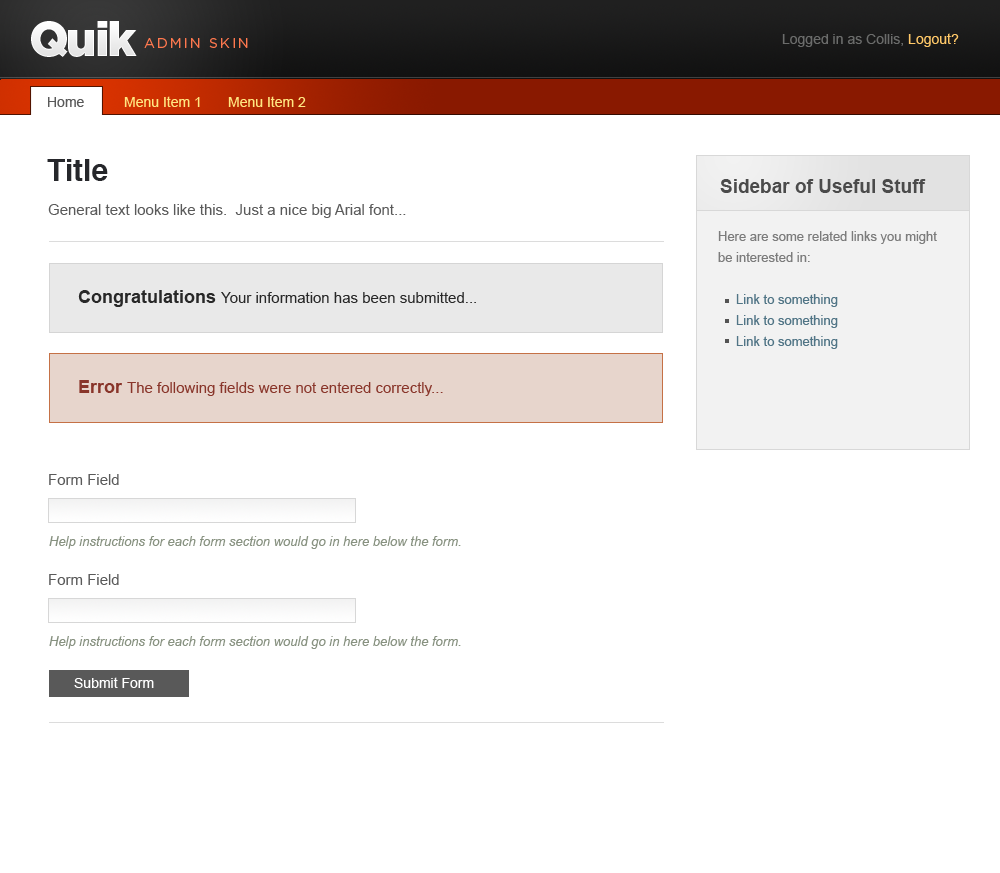
<style>
.page{position:relative;width:1000px;height:873px;background:#ffffff}
.page>*{position:absolute;margin:0}
.t1{font:48px "Gotham-Black";letter-spacing:-0.045em;color:#ffffff}
.t2{font:13.8px "GothamBook";letter-spacing:0.15em;color:#ff784e;text-transform:uppercase}
.t3{font:14px "ArialMT";color:#6b6c6b}
.t4{font:14px "ArialMT";color:#ffc868}
.t5{font:14px "ArialMT";color:#5a5a5a}
.t6{font:14px "ArialMT";color:#ffe681}
.t7{font:30px "Helvetica-Bold";color:#26272b}
.t8{font:19px "Arial-BoldMT";color:#4b4b4b}
.t9{font:15px "ArialMT";color:#5a5a5a}
.t10{font:13px/21px "ArialMT";color:#517586}
.t11{font:13px/21px "ArialMT";color:#7c7c7c}
.t12{font:15px "ArialMT";color:#282828}
.t13{font:18px "Arial-BoldMT";color:#282828}
.t14{font:15px "ArialMT";color:#89352a}
.t15{font:18px "Arial-BoldMT";color:#89352a}
.t16{font:13px "Arial-ItalicMT";color:#889281}
.t17{font:14px "ArialMT";color:#ffffff}
</style>
<div class="page">
<p class="t1" style="left:31px;top:21px;width:106px;height:36px">Quik</p>
<p class="t2" style="left:144px;top:38px;width:104px;height:10px">Admin Skin</p>
<p class="t3" style="left:782px;top:33px;width:177px;height:14px">Logged in as Collis, <span class="t4">Logout?</span></p>
<p class="t5" style="left:48px;top:97px;width:36px;height:10px">Home</p>
<p class="t6" style="left:124px;top:96px;width:76px;height:11px">Menu Item 1</p>
<p class="t6" style="left:228px;top:96px;width:78px;height:11px">Menu Item 2</p>
<p class="t7" style="left:47px;top:159px;width:61px;height:22px">Title</p>
<p class="t8" style="left:720px;top:179px;width:206px;height:14px">Sidebar of Useful Stuff</p>
<p class="t9" style="left:48px;top:204px;width:358px;height:14px">General text looks like this.  Just a nice big Arial font...</p>
<p class="t10" style="left:718px;top:231px;width:219px;height:118px"><span class="t11">Here are some related links you might <br>be interested in:<br><br>     </span>Link to something<br>     Link to something<br>     Link to something</p>
<p class="t12" style="left:78px;top:290px;width:398px;height:17px"><span class="t13">Congratulations </span>Your information has been submitted...</p>
<p class="t14" style="left:79px;top:380px;width:364px;height:16px"><span class="t15">Error </span>The following fields were not entered correctly...</p>
<p class="t9" style="left:49px;top:474px;width:70px;height:11px">Form Field</p>
<p class="t16" style="left:49px;top:536px;width:412px;height:13px">Help instructions for each form section would go in here below the form.</p>
<p class="t9" style="left:49px;top:574px;width:70px;height:11px">Form Field</p>
<p class="t16" style="left:49px;top:636px;width:412px;height:13px">Help instructions for each form section would go in here below the form.</p>
<p class="t17" style="left:74px;top:677px;width:80px;height:11px">Submit Form</p>
</div>
